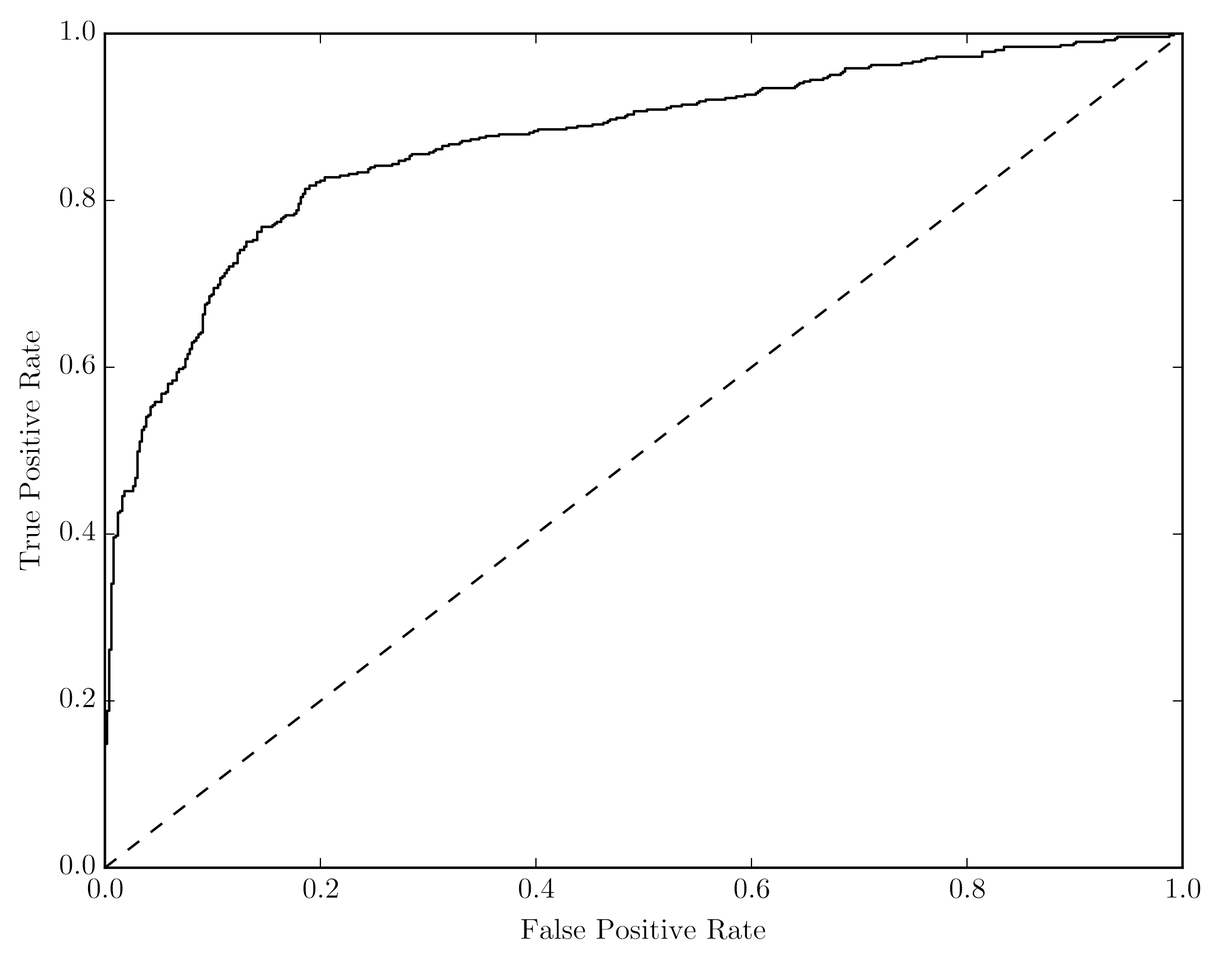
<style>
.page{position:relative;width:1226px;height:972px;background:#ffffff}
.page>*{position:absolute;margin:0}
.t1{font:29px "CMUSerif-Roman";color:#000000}
</style>
<div class="page">
<p class="t1" style="left:61px;top:20px;width:34px;height:21px">1.0</p>
<p class="t1" style="left:60px;top:187px;width:35px;height:20px">0.8</p>
<p class="t1" style="left:20px;top:331px;width:20px;height:240px;rotate:-90deg">True Positive Rate</p>
<p class="t1" style="left:60px;top:354px;width:35px;height:20px">0.6</p>
<p class="t1" style="left:60px;top:521px;width:36px;height:20px">0.4</p>
<p class="t1" style="left:60px;top:688px;width:35px;height:20px">0.2</p>
<p class="t1" style="left:60px;top:855px;width:35px;height:20px">0.0</p>
<p class="t1" style="left:88px;top:879px;width:35px;height:20px">0.0</p>
<p class="t1" style="left:303px;top:879px;width:35px;height:20px">0.2</p>
<p class="t1" style="left:519px;top:879px;width:36px;height:20px">0.4</p>
<p class="t1" style="left:734px;top:879px;width:36px;height:20px">0.6</p>
<p class="t1" style="left:950px;top:879px;width:35px;height:20px">0.8</p>
<p class="t1" style="left:1167px;top:879px;width:34px;height:20px">1.0</p>
<p class="t1" style="left:521px;top:919px;width:245px;height:21px">False Positive Rate</p>
</div>
